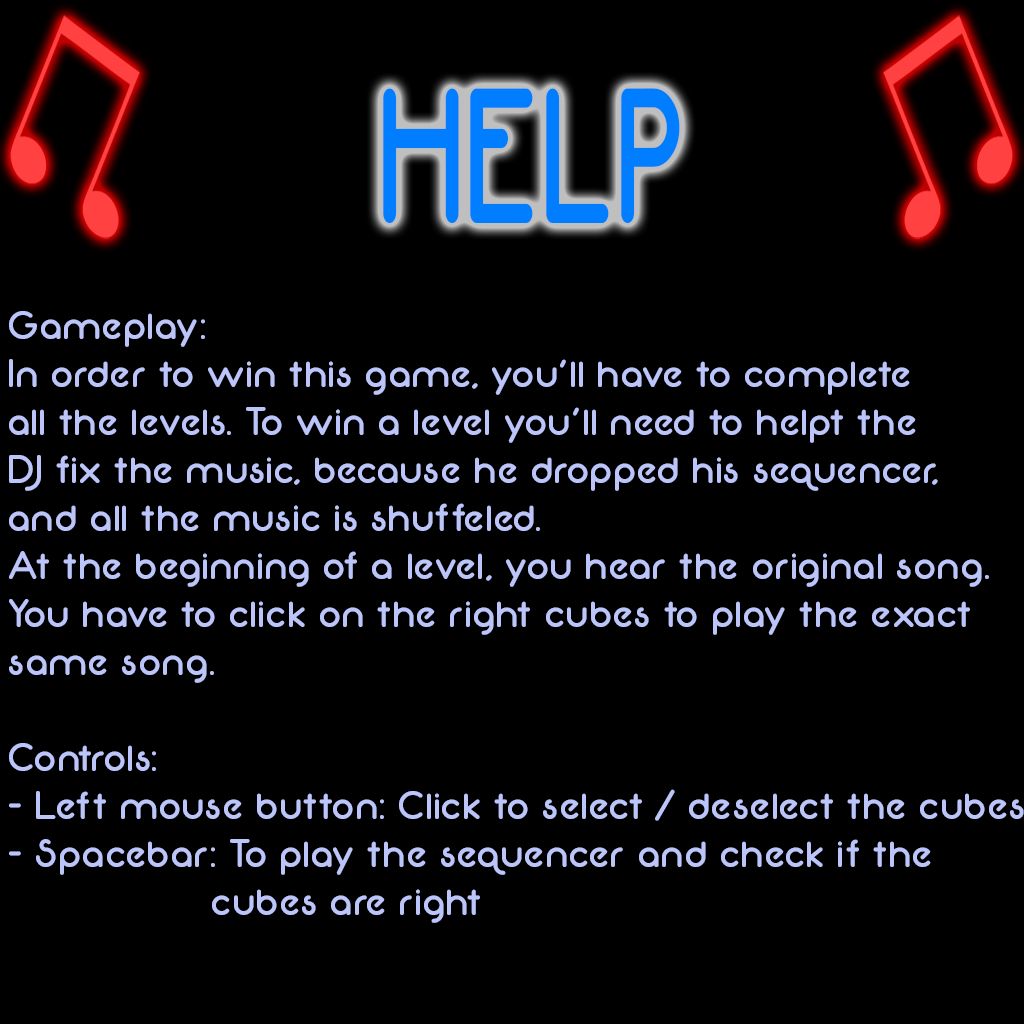
<style>
.page{position:relative;width:1024px;height:1024px;background:#000000}
.page>*{position:absolute;margin:0}
.t1{font:192px "Neon80s";color:#007eff;scale:0.67 1}
.t2{font:40px "Neon80s";color:#bcc5fa}
</style>
<div class="page">
<p class="t1" style="left:383px;top:88px;width:297px;height:135px">HELP</p>
<p class="t2" style="left:9px;top:311px;width:1015px;height:612px">Gameplay:<br>In order to win this game, you’ll have to complete <br>all the levels. To win a level you’ll need to helpt the <br>DJ fix the music, because he dropped his sequencer, <br>and all the music is shuffeled. <br>At the beginning of a level, you hear the original song. <br>You have to click on the right cubes to play the exact <br>same song.<br><br>Controls:<br>- Left mouse button: Click to select / deselect the cubes<br>- Spacebar: To play the sequencer and check if the <br>       cubes are right</p>
</div>
